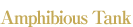
<style>
.page{position:relative;width:133px;height:27px;background:#ffffff}
.page>*{position:absolute;margin:0}
.t1{font:18px "RyuminPro-ExBold";letter-spacing:-0.08em;color:#c4a956}
</style>
<div class="page">
<p class="t1" style="left:0px;top:10px;width:132px;height:17px">Amphibious Tank</p>
</div>
